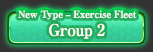
<style>
.page{position:relative;width:153px;height:52px}
.page>*{position:absolute;margin:0}
.t1{font:10px "RyuminPro-ExBold";letter-spacing:-0.04em;color:#fff6f1}
.t2{font:16px "RyuminPro-ExBold";letter-spacing:-0.04em;color:#fff6f1}
</style>
<div class="page">
<p class="t1" style="left:18px;top:10px;width:119px;height:10px">New Type – Exercise Fleet</p>
<p class="t2" style="left:49px;top:23px;width:56px;height:16px">Group 2</p>
</div>
